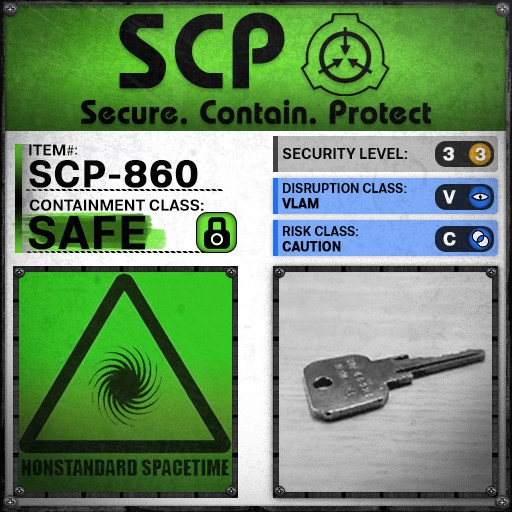
<style>
.page{position:relative;width:512px;height:512px}
.page>*{position:absolute;margin:0}
.t1{font:105.8px "BauhausLT-Demi";color:#000000;font-weight:bold}
.t2{font:33px "BauhausLT-Demi";color:#000000;font-weight:bold}
.t3{font:15.7px "Molde-Semibold";color:#000000}
.t4{font:15.7px "MyriadPro-Regular";color:#000000}
.t5{font:13.7px "Molde-Semibold";color:#000000}
.t6{font:15px "Molde-Semibold";color:#000000}
.t7{font:18.6px "Molde-Semibold";color:#ffffff;font-weight:bold}
.t8{font:17.8px "Molde-Semibold";color:#d6d7d7;font-weight:bold}
.t9{font:38.2px "Molde-Semibold";color:#000000;font-weight:bold}
.t10{font:12.8px "Molde-Semibold";color:#000000}
.t11{font:12.8px "Molde-Semibold";color:#000000;font-weight:bold}
.t12{font:15.9px "Molde-Semibold";color:#000000}
.t13{font:47.2px "Molde-Semibold";color:#000000;font-weight:bold}
</style>
<div class="page">
<p class="t1" style="left:119px;top:12px;width:166px;height:77px">SCP</p>
<p class="t2" style="left:81px;top:99px;width:350px;height:26px">Secure. Contain. Protect</p>
<p class="t3" style="left:29px;top:144px;width:45px;height:12px">ITEM<span class="t4">#</span></p>
<p class="t5" style="left:75px;top:147px;width:2px;height:8px">:</p>
<p class="t6" style="left:283px;top:148px;width:124px;height:11px">SECURITY LEVEL:</p>
<p class="t7" style="left:443px;top:147px;width:11px;height:14px">3</p>
<p class="t8" style="left:475px;top:147px;width:11px;height:14px">3</p>
<p class="t9" style="left:29px;top:160px;width:169px;height:28px">SCP-860</p>
<p class="t10" style="left:282px;top:183px;width:125px;height:26px">DISRUPTION CLASS:<br><span class="t11">VLAM</span></p>
<p class="t7" style="left:443px;top:190px;width:13px;height:14px">V</p>
<p class="t12" style="left:29px;top:199px;width:175px;height:12px">CONTAINMENT CLASS:</p>
<p class="t13" style="left:28px;top:215px;width:118px;height:35px">SAFE</p>
<p class="t10" style="left:282px;top:226px;width:76px;height:26px">RISK CLASS:<br><span class="t11">CAUTION</span></p>
<p class="t7" style="left:443px;top:232px;width:13px;height:14px">C</p>
</div>
